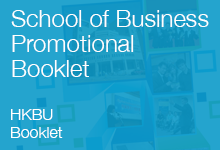
<style>
.page{position:relative;width:220px;height:150px;background:#24a4ce}
.page>*{position:absolute;margin:0}
.t1{font:24px/25px "HelveticaNeue-Light";color:#ffffff}
.t2{font:16px/18px "HelveticaNeue-Light";color:#ffffff}
</style>
<div class="page">
<p class="t1" style="left:11px;top:10px;width:198px;height:67px">School of Business<br>Promotional<br>Booklet</p>
<p class="t2" style="left:11px;top:109px;width:52px;height:29px">HKBU<br>Booklet</p>
</div>
